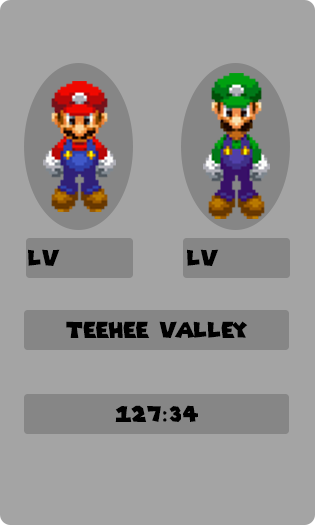
<style>
.page{position:relative;width:315px;height:525px;background:#a4a4a4}
.page>*{position:absolute;margin:0}
.t1{font:21.9px "SuperMarioGalaxy";color:#000000}
</style>
<div class="page">
<p class="t1" style="left:28px;top:249px;width:32px;height:17px">Lv</p>
<p class="t1" style="left:187px;top:249px;width:32px;height:17px">Lv</p>
<p class="t1" style="left:66px;top:321px;width:182px;height:17px">Teehee valley</p>
<p class="t1" style="left:115px;top:405px;width:83px;height:17px">127:34</p>
</div>
